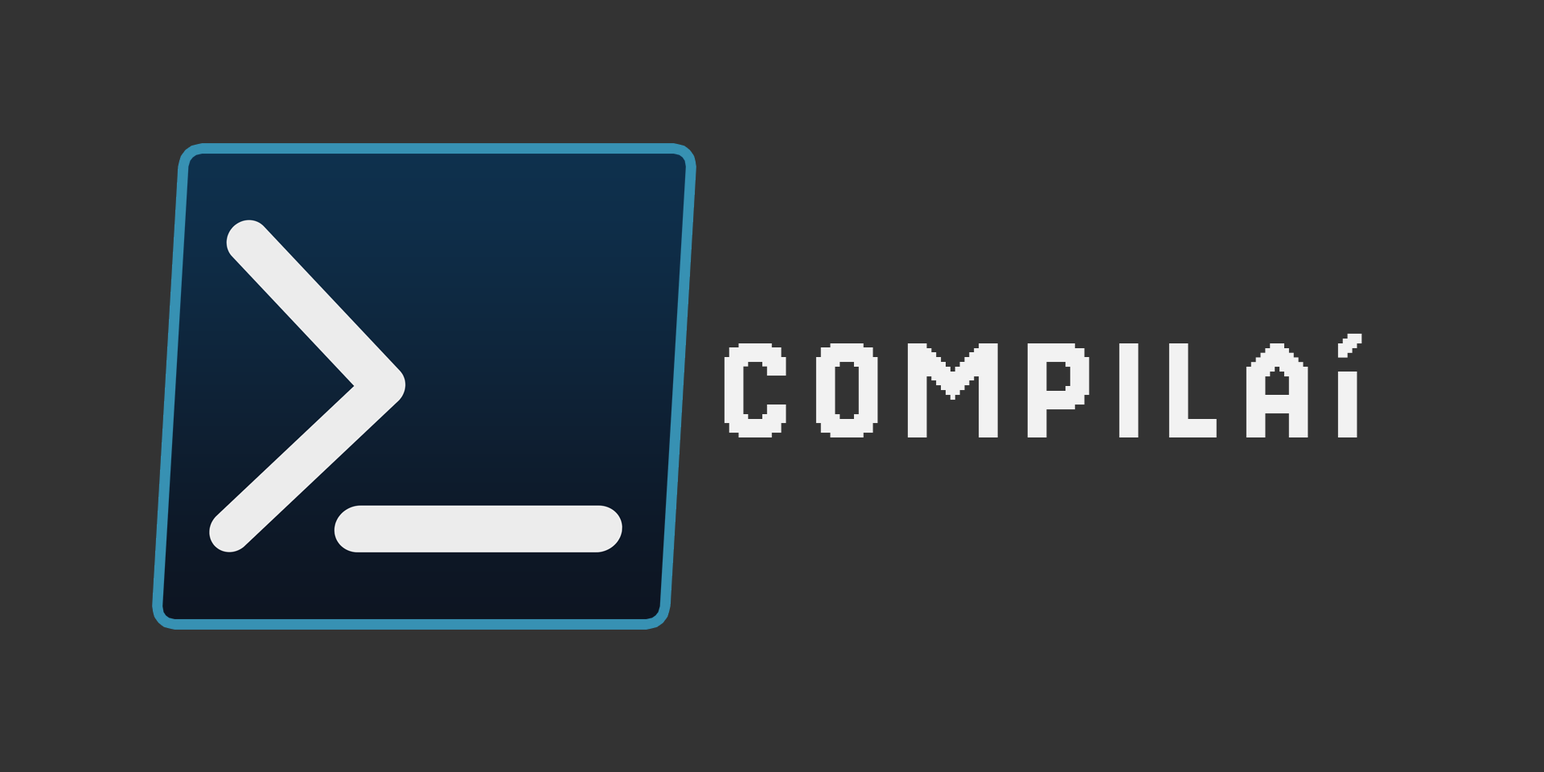
<style>
.page{position:relative;width:1544px;height:772px;background:#333333}
.page>*{position:absolute;margin:0}
.t1{font:160.9px "Jersey20-Regular";letter-spacing:0.1em;color:#f2f2f2}
</style>
<div class="page">
<p class="t1" style="left:724px;top:333px;width:639px;height:105px">COMPILAí</p>
</div>
